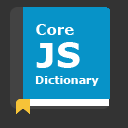
<style>
.page{position:relative;width:128px;height:128px;background:#0793c8}
.page>*{position:absolute;margin:0}
.t1{font:15px "Verdana-Bold";color:#ffffff}
.t2{font:35px "Verdana-Bold";color:#ffffff}
.t3{font:11px "Verdana-Bold";color:#ffffff}
</style>
<div class="page">
<p class="t1" style="left:36px;top:24px;width:38px;height:11px">Core</p>
<p class="t2" style="left:36px;top:42px;width:44px;height:26px">JS</p>
<p class="t3" style="left:35px;top:76px;width:64px;height:10px">Dictionary</p>
</div>
